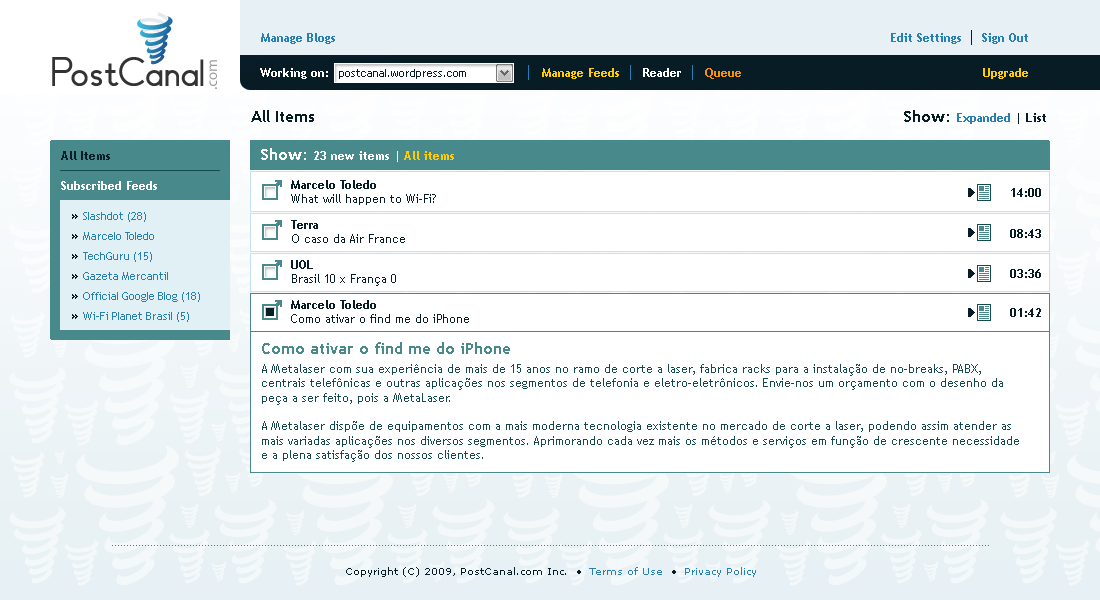
<style>
.page{position:relative;width:1100px;height:600px;background:#ffffff}
.page>*{position:absolute;margin:0}
.t1{font:12px "TrebuchetMS-Bold";color:#2780b1}
.t2{font:12px "TrebuchetMS-Bold";color:#ffffff}
.t3{font:11px "TrebuchetMS";color:#081c26}
.t4{font:12px "TrebuchetMS-Bold";color:#ffcc00}
.t5{font:12px "TrebuchetMS-Bold";color:#ff8e00}
.t6{font:16px "TrebuchetMS-Bold";color:#081c26}
.t7{font:12px "TrebuchetMS-Bold";color:#081c26}
.t8{font:16px "TrebuchetMS-Bold";color:#ffffff}
.t9{font:12px/30px "TrebuchetMS-Bold";color:#ffffff}
.t10{font:12px/30px "TrebuchetMS-Bold";color:#081d27}
.t11{font:12px "TrebuchetMS";color:#081c26}
.t12{font:11px/20px "TrebuchetMS";color:#2780b1}
.t13{font:14px/20px "TrebuchetMS-Bold";color:#081c26}
.t14{font:16px "TrebuchetMS-Bold";color:#48898c}
.t15{font:12px "TrebuchetMS";color:#144a4d}
.t16{font:10px "Verdana";color:#081c26}
.t17{font:10px "Verdana";color:#2780b1}
</style>
<div class="page">
<p class="t1" style="left:261px;top:33px;width:74px;height:11px">Manage Blogs</p>
<p class="t1" style="left:891px;top:33px;width:70px;height:11px">Edit Settings</p>
<p class="t1" style="left:982px;top:33px;width:46px;height:11px">Sign Out</p>
<p class="t2" style="left:260px;top:68px;width:68px;height:11px">Working on:</p>
<p class="t3" style="left:339px;top:69px;width:127px;height:10px">postcanal.wordpress.com</p>
<p class="t4" style="left:542px;top:68px;width:77px;height:11px">Manage Feeds</p>
<p class="t2" style="left:643px;top:68px;width:38px;height:9px">Reader</p>
<p class="t5" style="left:705px;top:68px;width:36px;height:11px">Queue</p>
<p class="t4" style="left:983px;top:68px;width:45px;height:11px">Upgrade</p>
<p class="t6" style="left:251px;top:110px;width:63px;height:12px">All Items</p>
<p class="t1" style="left:904px;top:110px;width:142px;height:14px"><span class="t6">Show: </span>Expanded<span class="t7"> | List</span></p>
<p class="t2" style="left:261px;top:148px;width:193px;height:14px"><span class="t8">Show: </span>23 new items | <span class="t4">All items</span></p>
<p class="t9" style="left:61px;top:151px;width:96px;height:39px"><span class="t10">All Items<br></span>Subscribed Feeds</p>
<p class="t11" style="left:291px;top:180px;width:145px;height:25px"><span class="t7">Marcelo Toledo<br></span>What will happen to Wi-Fi?</p>
<p class="t7" style="left:1011px;top:188px;width:30px;height:9px">14:00</p>
<p class="t12" style="left:72px;top:212px;width:128px;height:110px"><span class="t13">» </span>Slashdot (28)<br><span class="t13">» </span>Marcelo Toledo<br><span class="t13">» </span>TechGuru (15)<br><span class="t13">» </span>Gazeta Mercantil<br><span class="t13">» </span>Official Google Blog (18)<br><span class="t13">» </span>Wi-Fi Planet Brasil (5)</p>
<p class="t11" style="left:291px;top:220px;width:114px;height:23px"><span class="t7">Terra<br></span>O caso da Air France</p>
<p class="t7" style="left:1010px;top:229px;width:31px;height:9px">08:43</p>
<p class="t11" style="left:291px;top:260px;width:105px;height:26px"><span class="t7">UOL<br></span>Brasil 10 x França 0</p>
<p class="t7" style="left:1010px;top:269px;width:31px;height:9px">03:36</p>
<p class="t11" style="left:291px;top:300px;width:178px;height:23px"><span class="t7">Marcelo Toledo<br></span>Como ativar o find me do iPhone</p>
<p class="t7" style="left:1010px;top:308px;width:31px;height:9px">01:42</p>
<p class="t14" style="left:262px;top:342px;width:248px;height:12px">Como ativar o find me do iPhone</p>
<p class="t15" style="left:262px;top:364px;width:757px;height:98px">A Metalaser com sua experiência de mais de 15 anos no ramo de corte a laser, fabrica racks para a instalação de no-breaks, PABX, centrais telefônicas e outras aplicações nos segmentos de telefonia e eletro-eletrônicos. Envie-nos um orçamento com o desenho da peça a ser feito, pois a MetaLaser.<br><br>A Metalaser dispõe de equipamentos com a mais moderna tecnologia existente no mercado de corte a laser, podendo assim atender as mais variadas aplicações nos diversos segmentos. Aprimorando cada vez mais os métodos e serviços em função de crescente necessidade e a plena satisfação dos nossos clientes.</p>
<p class="t16" style="left:346px;top:567px;width:410px;height:10px">Copyright (C) 2009, PostCanal.com Inc.  • <span class="t17"> Terms of Use</span>  •  <span class="t17">Privacy Policy</span></p>
</div>
